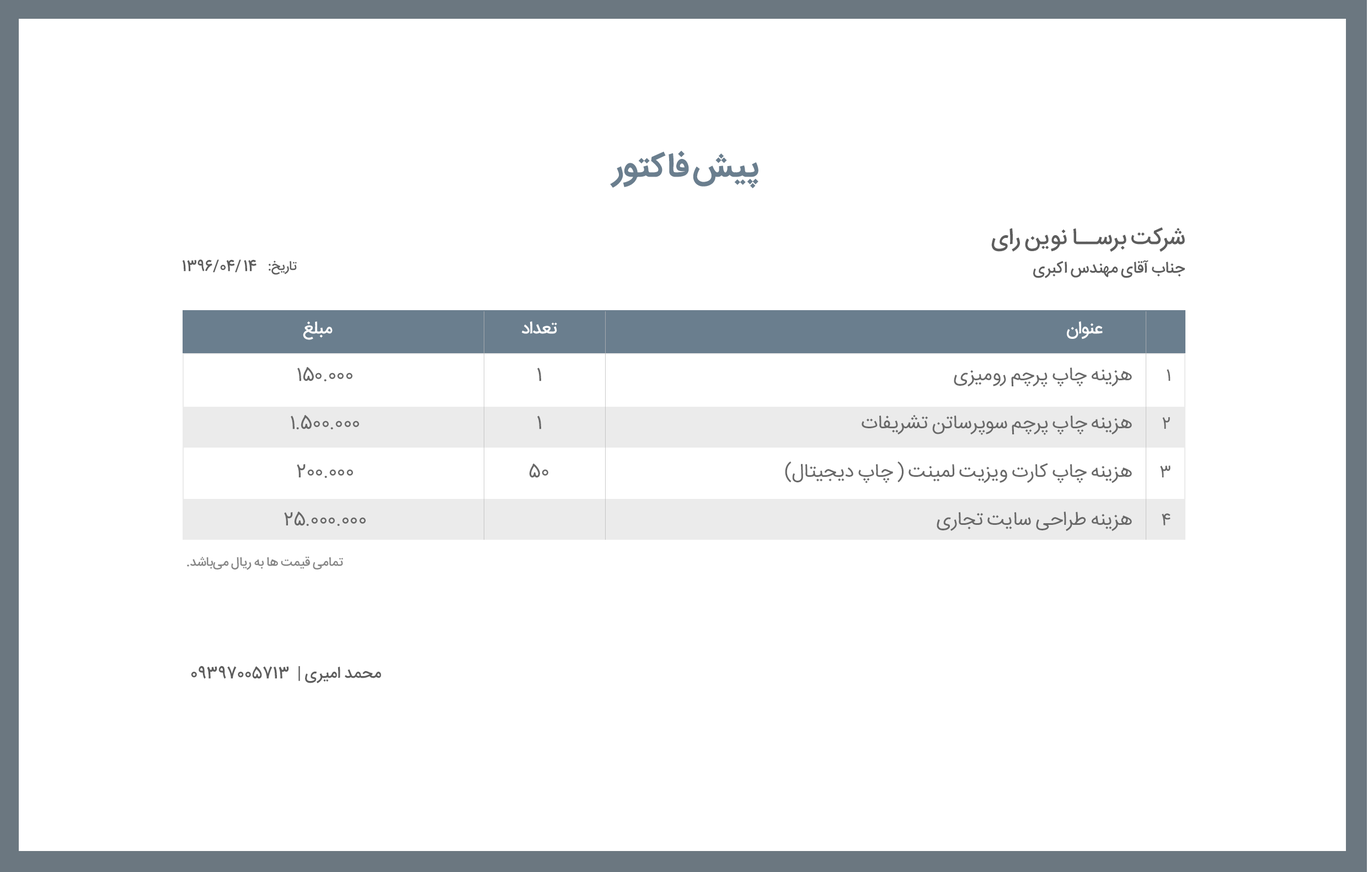
<style>
.page{position:relative;width:1368px;height:872px;background:#ffffff}
.page>*{position:absolute;margin:0}
.t1{font:33.3px "IRANSans-Bold";letter-spacing:-0.02em;color:#6a7e8e}
.t2{font:16.2px/9.2px "IRANSans-Medium";letter-spacing:-0.02em;color:#5d5d5d}
.t3{font:23.1px "IRANSans-Medium";letter-spacing:-0.02em;color:#5d5d5d}
.t4{font:15.2px "IRANSansFaNum-Medium";letter-spacing:-0.02em;color:#5d5d5d}
.t5{font:13.2px "IRANSans-Medium";letter-spacing:-0.02em;color:#5d5d5d}
.t6{font:17.7px "IRANSans-Medium";letter-spacing:-0.02em;color:#ffffff}
.t7{font:18.8px/48.3px "IRANSansFaNum";letter-spacing:-0.02em;color:#686868}
.t8{font:19.3px/48.3px "IRANSans";letter-spacing:-0.02em;color:#686868}
.t9{font:16.5px/48.3px "IRANSansFaNum";letter-spacing:-0.02em;color:#686868}
.t10{font:12.8px "IRANSans-Medium";letter-spacing:-0.02em;color:#868686}
.t11{font:16.2px "IRANSans-Medium";letter-spacing:-0.02em;color:#5d5d5d}
.t12{font:16.2px "IRANSansFaNum-Medium";color:#5d5d5d}
</style>
<div class="page">
<p class="t1" style="left:610px;top:151px;width:149px;height:38px">پیش فاکتور</p>
<p class="t2" style="left:991px;top:227px;width:194px;height:51px"><span class="t3">شرکت برســا نوین رای<br><br></span>جناب آقای مهندس اکبری</p>
<p class="t4" style="left:182px;top:259px;width:37px;height:14px">1396/</p>
<p class="t4" style="left:220px;top:259px;width:21px;height:14px">04/</p>
<p class="t4" style="left:244px;top:259px;width:13px;height:12px">14</p>
<p class="t5" style="left:269px;top:260px;width:28px;height:15px">تاریخ:</p>
<p class="t6" style="left:303px;top:321px;width:30px;height:19px">مبلغ</p>
<p class="t6" style="left:522px;top:321px;width:35px;height:13px">تعداد</p>
<p class="t6" style="left:1067px;top:321px;width:36px;height:18px">عنوان</p>
<p class="t7" style="left:284px;top:366px;width:82px;height:160px;text-align:center">150.000<br>1.500.000<br>200.000<br>25.000.000</p>
<p class="t7" style="left:529px;top:367px;width:19px;height:111px;text-align:center">1<br>1<br>50</p>
<p class="t8" style="left:785px;top:367px;width:347px;height:164px">هزینه چاپ پرچم رومیزی <br>هزینه چاپ پرچم سوپرساتن تشریفات <br>هزینه چاپ کارت ویزیت لمینت ( چاپ دیجیتال)<br>هزینه طراحی سایت تجاری</p>
<p class="t9" style="left:1160px;top:369px;width:11px;height:156px">1<br>2<br>3<br>4</p>
<p class="t10" style="left:187px;top:556px;width:156px;height:14px">تمامی قیمت ها به ریال می باشد.</p>
<p class="t11" style="left:191px;top:665px;width:190px;height:18px">محمد امیری |  <span class="t12">09397005713</span></p>
</div>
